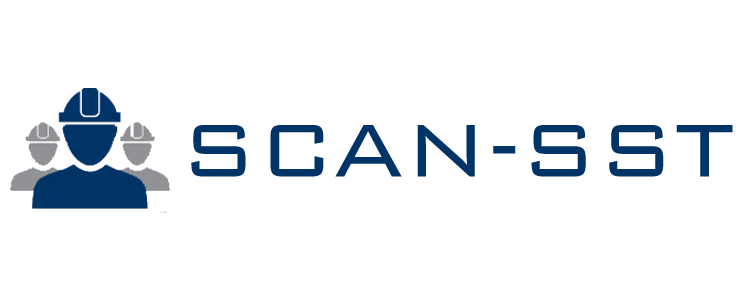
<style>
.page{position:relative;width:743px;height:301px;background:#ffffff}
.page>*{position:absolute;margin:0}
.t1{font:99.5px "BankGothicBT-Light";color:#003366;text-transform:uppercase}
</style>
<div class="page">
<p class="t1" style="left:191px;top:125px;width:542px;height:52px">SCAN-SST</p>
</div>
